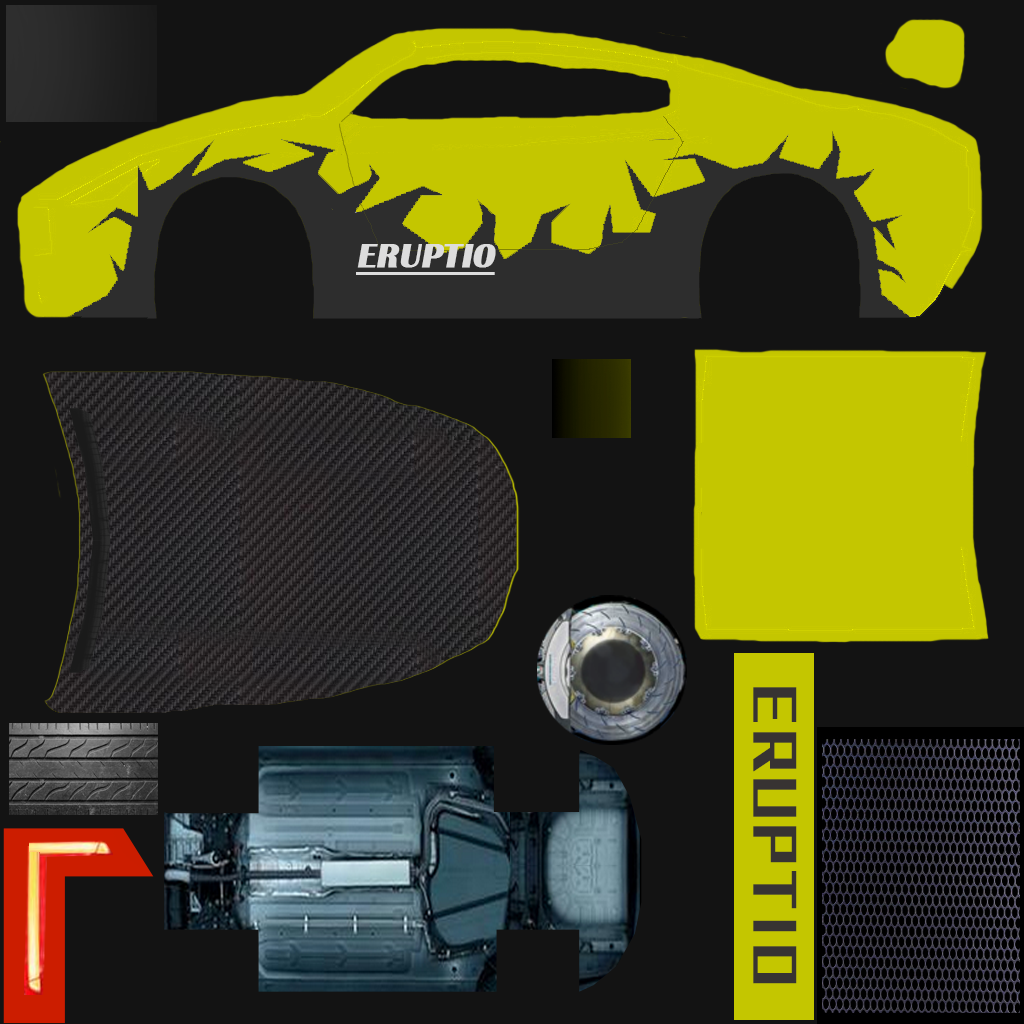
<style>
.page{position:relative;width:1024px;height:1024px;background:#131313}
.page>*{position:absolute;margin:0}
.t1{font:34.1px "BritannicBold";color:#dddddd;font-weight:bold;font-style:italic;text-decoration:underline}
.t2{font:57.9px "BigruixianBoldkGBV1.0";color:#373332;font-weight:bold}
</style>
<div class="page">
<p class="t1" style="left:356px;top:244px;width:140px;height:31px">ERUPTIO</p>
<p class="t2" style="left:753px;top:687px;width:44px;height:297px;rotate:90deg">ERUPTIO</p>
</div>
